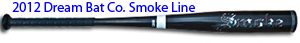
<style>
.page{position:relative;width:300px;height:43px;background:#ffffff}
.page>*{position:absolute;margin:0}
.t1{font:14px "MyriadPro-Regular";color:#0000ff}
</style>
<div class="page">
<p class="t1" style="left:12px;top:2px;width:183px;height:10px">2012 Dream Bat Co. Smoke Line</p>
</div>
